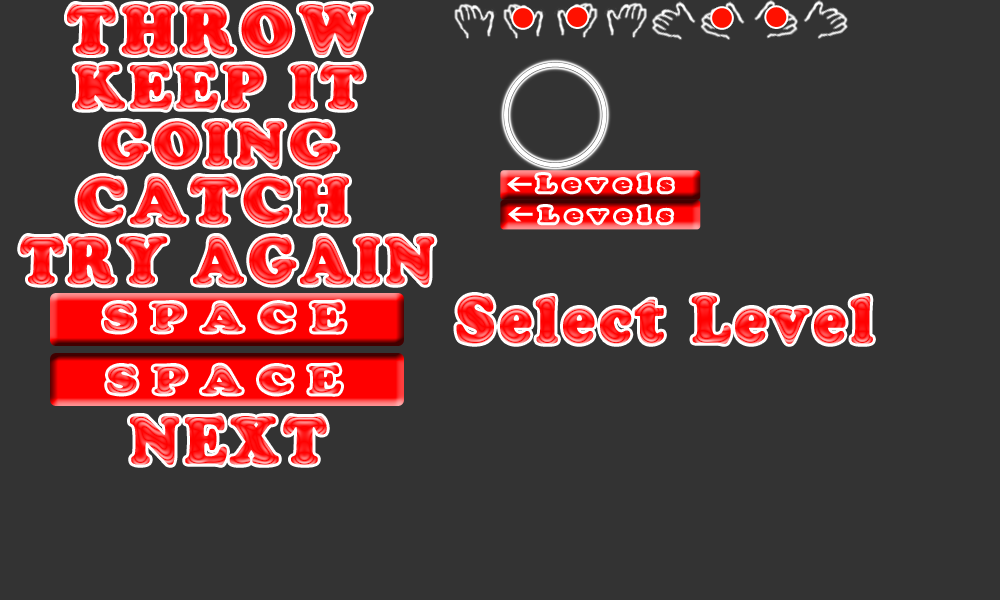
<style>
.page{position:relative;width:1000px;height:600px;background:#333333}
.page>*{position:absolute;margin:0}
.t1{font:68.4px "CooperBlackStd";letter-spacing:0.08em;font-weight:bold;scale:0.93 1}
.t2{font:61px/57px "CooperBlackStd";letter-spacing:0.06em;font-weight:bold;scale:0.93 1}
.t3{font:65.5px "CooperBlackStd";letter-spacing:0.06em;font-weight:bold;scale:0.96 1}
.t4{font:21.8px "CooperBlackStd";letter-spacing:0.36em;color:#ff0d0d;font-weight:bold;scale:1.18 1}
.t5{font:21.3px "CooperBlackStd";letter-spacing:0.36em;color:#ff0b0b;font-weight:bold;scale:1.18 1}
.t6{font:65.5px "CooperBlackStd";letter-spacing:0.06em;font-weight:bold;scale:0.87 1}
</style>
<div class="page">
<p class="t1" style="left:67px;top:4px;width:304px;height:52px">THROW</p>
<p class="t2" style="left:74px;top:63px;width:290px;height:104px;text-align:center">KEEP IT GOING</p>
<p class="t3" style="left:77px;top:176px;width:272px;height:49px">CATCH</p>
<p class="t4" style="left:537px;top:175px;width:135px;height:17px">Levels</p>
<p class="t5" style="left:539px;top:207px;width:133px;height:16px">Levels</p>
<p class="t6" style="left:20px;top:236px;width:415px;height:50px">TRY AGAIN</p>
<p class="t6" style="left:456px;top:295px;width:417px;height:49px">Select Level</p>
<p class="t6" style="left:130px;top:415px;width:197px;height:50px">NEXT</p>
</div>
